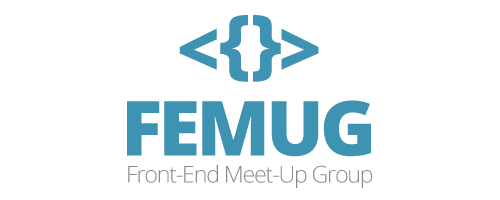
<style>
.page{position:relative;width:500px;height:200px;background:#ffffff}
.page>*{position:absolute;margin:0}
.t1{font:75.1px "OpenSans-Extrabold";color:#3e93b3}
.t2{font:75.1px "OpenSans-Extrabold";letter-spacing:-0.05em;color:#3e93b3}
.t3{font:76.1px "OpenSans-Extrabold";letter-spacing:-0.05em;color:#3e93b3}
.t4{font:23.1px "OpenSans-Light";letter-spacing:-0.05em;color:#8c8c8c}
</style>
<div class="page">
<p class="t1" style="left:220px;top:15px;width:61px;height:67px">{}</p>
<p class="t2" style="left:179px;top:28px;width:140px;height:42px">&lt;    &gt;</p>
<p class="t3" style="left:127px;top:100px;width:244px;height:57px">FEMUG</p>
<p class="t4" style="left:128px;top:164px;width:245px;height:24px">Front-End Meet-Up Group</p>
</div>
